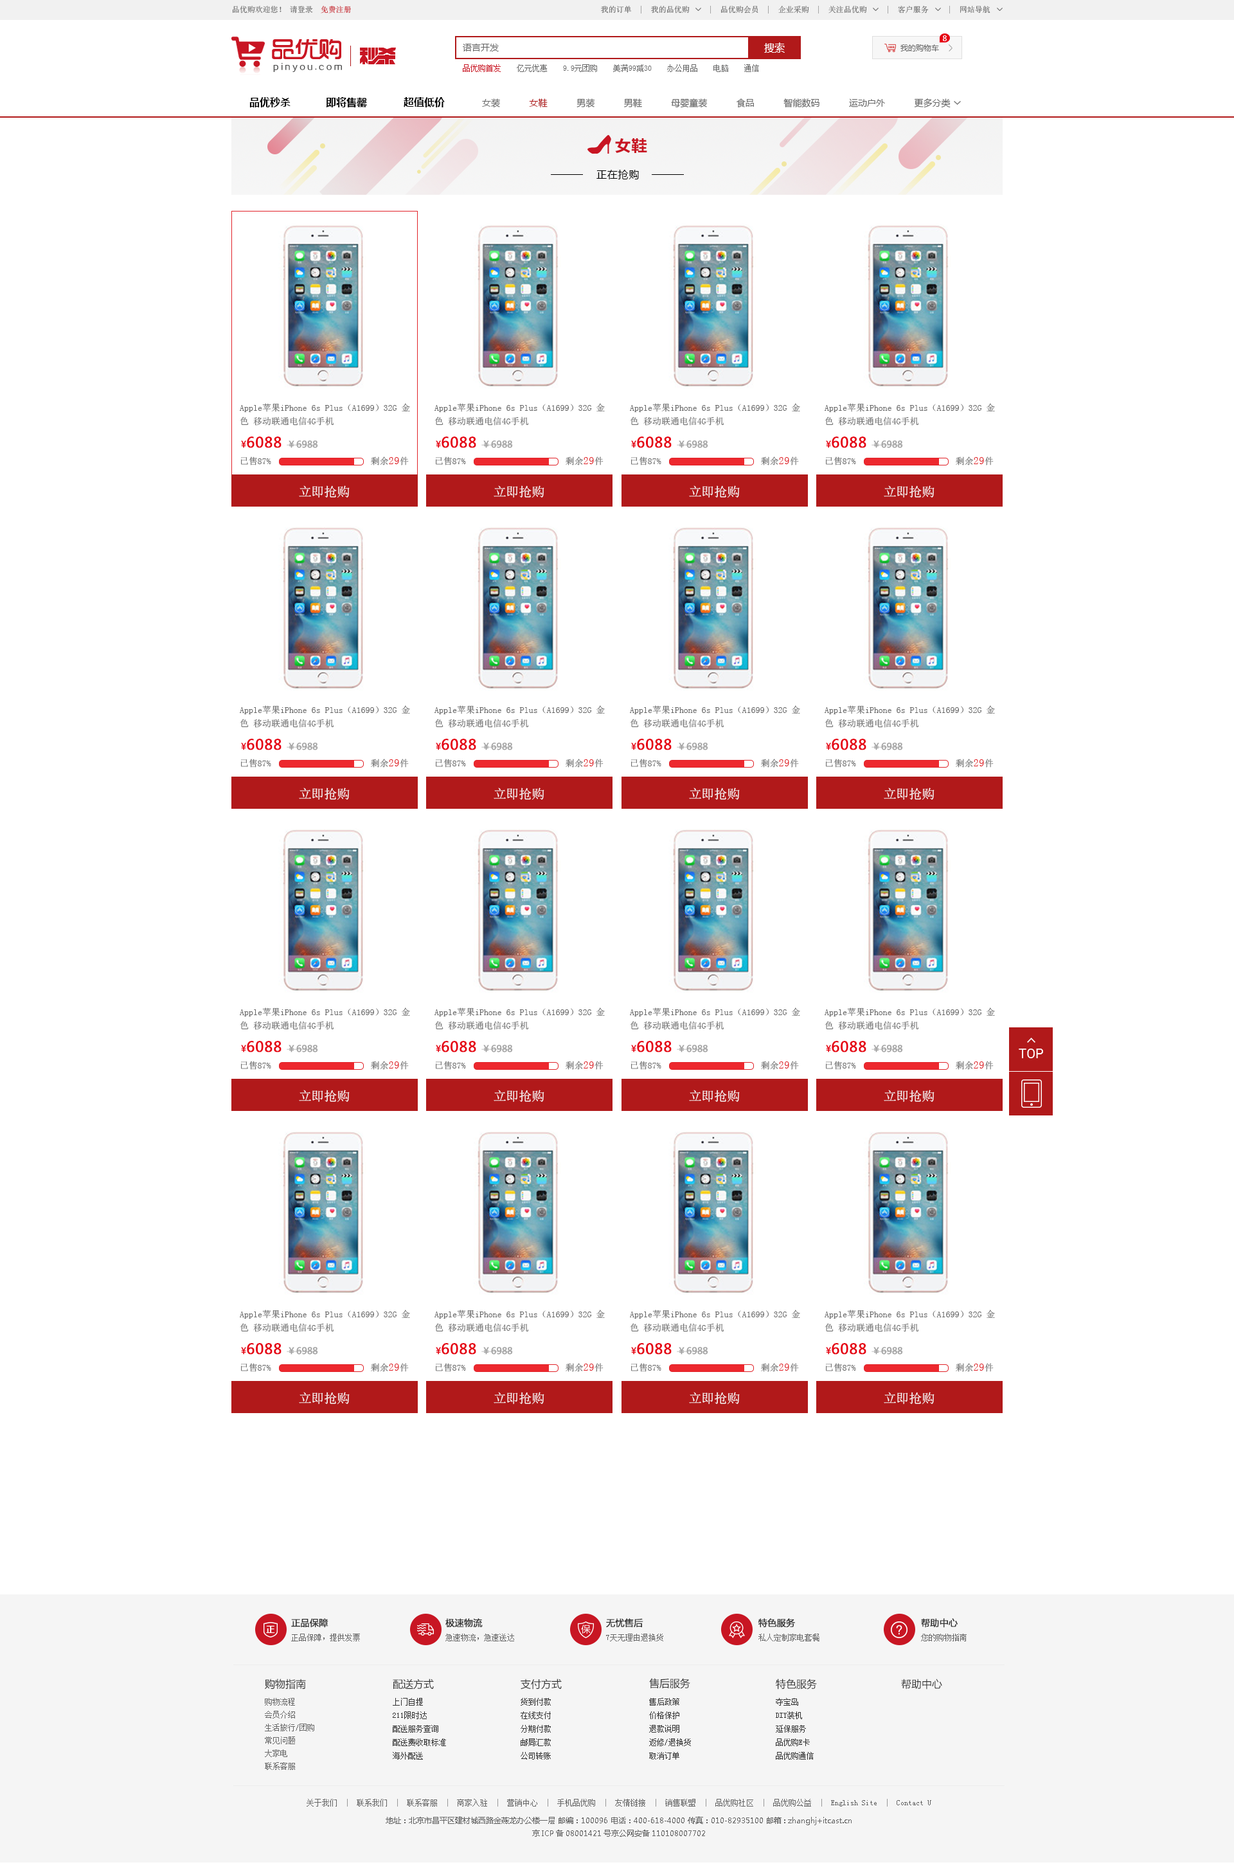
<style>
.page{position:relative;width:1234px;height:1867px;background:#ffffff}
.page>*{position:absolute;margin:0}
.t1{font:7.7px "SimSun";color:#666666}
.t2{font:7.7px "SimSun";color:#c81623}
.t3{font:7.7px "MicrosoftYaHei";color:#fefefe}
.t4{font:9px "MicrosoftYaHei";color:#666666}
.t5{font:10.3px "MicrosoftYaHei";color:#ffffff}
.t6{font:7.7px "MicrosoftYaHei";color:#666666}
.t7{font:10.3px "MicrosoftYaHei-Bold";color:#000000}
.t8{font:9px "MicrosoftYaHei";color:#b1191a}
.t9{font:15.4px "MicrosoftYaHei-Bold";letter-spacing:0.05em;color:#c81523}
.t10{font:10.3px "MicrosoftYaHei";letter-spacing:0.05em;color:#000000}
.t11{font:9px/13.5px "SimSun";color:#666666}
.t12{font:9px "MicrosoftYaHei";color:#a4a4a4;font-weight:bold}
.t13{font:9px "MicrosoftYaHei";color:#e60012;font-weight:bold}
.t14{font:14.1px "MicrosoftYaHei";color:#e60012;font-weight:bold}
.t15{font:9px "SimSun";color:#666666}
.t16{font:10.3px "SimSun";color:#e12228}
.t17{font:12.9px "SimSun";color:#ffffff}
.t18{font:12.9px "Roboto-Regular";color:#ffffff}
.t19{font:9px "MicrosoftYaHei";color:#333333;font-weight:bold}
.t20{font:10.3px "MicrosoftYaHei";color:#333333}
.t21{font:7.7px/12.9px "SimSun";color:#666666}
.t22{font:7.7px/13.5px "SimSun";color:#333333}
.t23{font:7.7px/12.9px "MicrosoftYaHei";color:#666666}
.t24{font:7.7px/18px "SimSun";color:#666666}
.t25{font:7.7px/18px "SimSun";color:#999999}
.t26{font:7.7px/8.4px "MicrosoftYaHei";color:#666666}
</style>
<div class="page">
<p class="t1" style="left:233px;top:6px;width:118px;height:7px">品优购欢迎您！ 请登录  <span class="t2">免费注册</span></p>
<p class="t1" style="left:601px;top:6px;width:390px;height:7px">我的订单  |  我的品优购     |  品优购会员  |  企业采购  |  关注品优购     |  客户服务     |  网站导航</p>
<p class="t3" style="left:943px;top:35px;width:4px;height:6px">8</p>
<p class="t4" style="left:463px;top:44px;width:36px;height:7px">语言开发</p>
<p class="t5" style="left:764px;top:42px;width:21px;height:11px">搜索</p>
<p class="t6" style="left:901px;top:44px;width:38px;height:7px">我的购物车</p>
<p class="t1" style="left:463px;top:64px;width:296px;height:8px"><span class="t2">品优购首发 </span>   亿元优惠    9.9元团购    美满99减30    办公用品    电脑    通信</p>
<p class="t7" style="left:249px;top:97px;width:42px;height:10px">品优秒杀</p>
<p class="t7" style="left:326px;top:97px;width:41px;height:10px">即将售罄</p>
<p class="t7" style="left:404px;top:97px;width:41px;height:10px">超值低价</p>
<p class="t4" style="left:482px;top:98px;width:469px;height:10px">女装           <span class="t8">女鞋</span>           男装           男鞋           母婴童装           食品           智能数码           运动户外           更多分类</p>
<p class="t9" style="left:615px;top:138px;width:32px;height:15px">女鞋</p>
<p class="t10" style="left:597px;top:170px;width:42px;height:9px">正在抢购</p>
<p class="t11" style="left:240px;top:403px;width:170px;height:23px">Apple苹果iPhone 6s Plus（A1699）32G 金色 移动联通电信4G手机</p>
<p class="t11" style="left:435px;top:403px;width:170px;height:23px">Apple苹果iPhone 6s Plus（A1699）32G 金色 移动联通电信4G手机</p>
<p class="t11" style="left:630px;top:403px;width:170px;height:23px">Apple苹果iPhone 6s Plus（A1699）32G 金色 移动联通电信4G手机</p>
<p class="t11" style="left:825px;top:403px;width:170px;height:23px">Apple苹果iPhone 6s Plus（A1699）32G 金色 移动联通电信4G手机</p>
<p class="t12" style="left:241px;top:436px;width:77px;height:12px"><span class="t13">¥</span><span class="t14">6088 </span>￥6988</p>
<p class="t12" style="left:436px;top:436px;width:77px;height:12px"><span class="t13">¥</span><span class="t14">6088 </span>￥6988</p>
<p class="t12" style="left:631px;top:436px;width:77px;height:12px"><span class="t13">¥</span><span class="t14">6088 </span>￥6988</p>
<p class="t12" style="left:826px;top:436px;width:77px;height:12px"><span class="t13">¥</span><span class="t14">6088 </span>￥6988</p>
<p class="t15" style="left:241px;top:456px;width:30px;height:9px">已售87%</p>
<p class="t15" style="left:371px;top:456px;width:38px;height:9px">剩余<span class="t16">29</span>件</p>
<p class="t15" style="left:436px;top:456px;width:30px;height:9px">已售87%</p>
<p class="t15" style="left:566px;top:456px;width:38px;height:9px">剩余<span class="t16">29</span>件</p>
<p class="t15" style="left:631px;top:456px;width:30px;height:9px">已售87%</p>
<p class="t15" style="left:761px;top:456px;width:38px;height:9px">剩余<span class="t16">29</span>件</p>
<p class="t15" style="left:826px;top:456px;width:30px;height:9px">已售87%</p>
<p class="t15" style="left:956px;top:456px;width:38px;height:9px">剩余<span class="t16">29</span>件</p>
<p class="t17" style="left:299px;top:485px;width:51px;height:13px">立即抢购</p>
<p class="t17" style="left:494px;top:485px;width:50px;height:13px">立即抢购</p>
<p class="t17" style="left:689px;top:485px;width:51px;height:13px">立即抢购</p>
<p class="t17" style="left:884px;top:485px;width:51px;height:13px">立即抢购</p>
<p class="t11" style="left:240px;top:705px;width:170px;height:23px">Apple苹果iPhone 6s Plus（A1699）32G 金色 移动联通电信4G手机</p>
<p class="t11" style="left:435px;top:705px;width:170px;height:23px">Apple苹果iPhone 6s Plus（A1699）32G 金色 移动联通电信4G手机</p>
<p class="t11" style="left:630px;top:705px;width:170px;height:23px">Apple苹果iPhone 6s Plus（A1699）32G 金色 移动联通电信4G手机</p>
<p class="t11" style="left:825px;top:705px;width:170px;height:23px">Apple苹果iPhone 6s Plus（A1699）32G 金色 移动联通电信4G手机</p>
<p class="t12" style="left:241px;top:739px;width:77px;height:11px"><span class="t13">¥</span><span class="t14">6088 </span>￥6988</p>
<p class="t12" style="left:436px;top:739px;width:77px;height:11px"><span class="t13">¥</span><span class="t14">6088 </span>￥6988</p>
<p class="t12" style="left:631px;top:739px;width:77px;height:11px"><span class="t13">¥</span><span class="t14">6088 </span>￥6988</p>
<p class="t12" style="left:826px;top:739px;width:77px;height:11px"><span class="t13">¥</span><span class="t14">6088 </span>￥6988</p>
<p class="t15" style="left:241px;top:759px;width:30px;height:9px">已售87%</p>
<p class="t15" style="left:371px;top:759px;width:38px;height:9px">剩余<span class="t16">29</span>件</p>
<p class="t15" style="left:436px;top:759px;width:30px;height:9px">已售87%</p>
<p class="t15" style="left:566px;top:759px;width:38px;height:9px">剩余<span class="t16">29</span>件</p>
<p class="t15" style="left:631px;top:759px;width:30px;height:9px">已售87%</p>
<p class="t15" style="left:761px;top:759px;width:38px;height:9px">剩余<span class="t16">29</span>件</p>
<p class="t15" style="left:826px;top:759px;width:30px;height:9px">已售87%</p>
<p class="t15" style="left:956px;top:759px;width:38px;height:9px">剩余<span class="t16">29</span>件</p>
<p class="t17" style="left:299px;top:787px;width:51px;height:13px">立即抢购</p>
<p class="t17" style="left:494px;top:787px;width:50px;height:13px">立即抢购</p>
<p class="t17" style="left:689px;top:787px;width:51px;height:13px">立即抢购</p>
<p class="t17" style="left:884px;top:787px;width:51px;height:13px">立即抢购</p>
<p class="t11" style="left:240px;top:1007px;width:170px;height:23px">Apple苹果iPhone 6s Plus（A1699）32G 金色 移动联通电信4G手机</p>
<p class="t11" style="left:435px;top:1007px;width:170px;height:23px">Apple苹果iPhone 6s Plus（A1699）32G 金色 移动联通电信4G手机</p>
<p class="t11" style="left:630px;top:1007px;width:170px;height:23px">Apple苹果iPhone 6s Plus（A1699）32G 金色 移动联通电信4G手机</p>
<p class="t11" style="left:825px;top:1007px;width:170px;height:23px">Apple苹果iPhone 6s Plus（A1699）32G 金色 移动联通电信4G手机</p>
<p class="t12" style="left:241px;top:1041px;width:77px;height:11px"><span class="t13">¥</span><span class="t14">6088 </span>￥6988</p>
<p class="t12" style="left:436px;top:1041px;width:77px;height:11px"><span class="t13">¥</span><span class="t14">6088 </span>￥6988</p>
<p class="t12" style="left:631px;top:1041px;width:77px;height:11px"><span class="t13">¥</span><span class="t14">6088 </span>￥6988</p>
<p class="t12" style="left:826px;top:1041px;width:77px;height:11px"><span class="t13">¥</span><span class="t14">6088 </span>￥6988</p>
<p class="t18" style="left:1019px;top:1048px;width:24px;height:10px">TOP</p>
<p class="t15" style="left:241px;top:1061px;width:30px;height:9px">已售87%</p>
<p class="t15" style="left:371px;top:1061px;width:38px;height:9px">剩余<span class="t16">29</span>件</p>
<p class="t15" style="left:436px;top:1061px;width:30px;height:9px">已售87%</p>
<p class="t15" style="left:566px;top:1061px;width:38px;height:9px">剩余<span class="t16">29</span>件</p>
<p class="t15" style="left:631px;top:1061px;width:30px;height:9px">已售87%</p>
<p class="t15" style="left:761px;top:1061px;width:38px;height:9px">剩余<span class="t16">29</span>件</p>
<p class="t15" style="left:826px;top:1061px;width:30px;height:9px">已售87%</p>
<p class="t15" style="left:956px;top:1061px;width:38px;height:9px">剩余<span class="t16">29</span>件</p>
<p class="t17" style="left:299px;top:1090px;width:51px;height:12px">立即抢购</p>
<p class="t17" style="left:494px;top:1090px;width:50px;height:12px">立即抢购</p>
<p class="t17" style="left:689px;top:1090px;width:51px;height:12px">立即抢购</p>
<p class="t17" style="left:884px;top:1090px;width:51px;height:12px">立即抢购</p>
<p class="t11" style="left:240px;top:1309px;width:170px;height:23px">Apple苹果iPhone 6s Plus（A1699）32G 金色 移动联通电信4G手机</p>
<p class="t11" style="left:435px;top:1309px;width:170px;height:23px">Apple苹果iPhone 6s Plus（A1699）32G 金色 移动联通电信4G手机</p>
<p class="t11" style="left:630px;top:1309px;width:170px;height:23px">Apple苹果iPhone 6s Plus（A1699）32G 金色 移动联通电信4G手机</p>
<p class="t11" style="left:825px;top:1309px;width:170px;height:23px">Apple苹果iPhone 6s Plus（A1699）32G 金色 移动联通电信4G手机</p>
<p class="t12" style="left:241px;top:1343px;width:77px;height:11px"><span class="t13">¥</span><span class="t14">6088 </span>￥6988</p>
<p class="t12" style="left:436px;top:1343px;width:77px;height:11px"><span class="t13">¥</span><span class="t14">6088 </span>￥6988</p>
<p class="t12" style="left:631px;top:1343px;width:77px;height:11px"><span class="t13">¥</span><span class="t14">6088 </span>￥6988</p>
<p class="t12" style="left:826px;top:1343px;width:77px;height:11px"><span class="t13">¥</span><span class="t14">6088 </span>￥6988</p>
<p class="t15" style="left:241px;top:1363px;width:30px;height:9px">已售87%</p>
<p class="t15" style="left:371px;top:1363px;width:38px;height:9px">剩余<span class="t16">29</span>件</p>
<p class="t15" style="left:436px;top:1363px;width:30px;height:9px">已售87%</p>
<p class="t15" style="left:566px;top:1363px;width:38px;height:9px">剩余<span class="t16">29</span>件</p>
<p class="t15" style="left:631px;top:1363px;width:30px;height:9px">已售87%</p>
<p class="t15" style="left:761px;top:1363px;width:38px;height:9px">剩余<span class="t16">29</span>件</p>
<p class="t15" style="left:826px;top:1363px;width:30px;height:9px">已售87%</p>
<p class="t15" style="left:956px;top:1363px;width:38px;height:9px">剩余<span class="t16">29</span>件</p>
<p class="t17" style="left:299px;top:1392px;width:51px;height:12px">立即抢购</p>
<p class="t17" style="left:494px;top:1392px;width:50px;height:12px">立即抢购</p>
<p class="t17" style="left:689px;top:1392px;width:51px;height:12px">立即抢购</p>
<p class="t17" style="left:884px;top:1392px;width:51px;height:12px">立即抢购</p>
<p class="t19" style="left:291px;top:1618px;width:37px;height:10px">正品保障</p>
<p class="t19" style="left:445px;top:1618px;width:38px;height:9px">极速物流</p>
<p class="t19" style="left:606px;top:1618px;width:37px;height:9px">无忧售后</p>
<p class="t19" style="left:758px;top:1618px;width:37px;height:10px">特色服务</p>
<p class="t19" style="left:921px;top:1618px;width:37px;height:10px">帮助中心</p>
<p class="t1" style="left:291px;top:1633px;width:69px;height:8px">正品保障，提供发票</p>
<p class="t1" style="left:445px;top:1633px;width:69px;height:8px">急速物流，急速送达</p>
<p class="t1" style="left:606px;top:1633px;width:57px;height:8px">7天无理由退换货</p>
<p class="t1" style="left:759px;top:1633px;width:61px;height:8px">私人定制家电套餐</p>
<p class="t1" style="left:921px;top:1633px;width:46px;height:8px">您的购物指南</p>
<p class="t20" style="left:265px;top:1678px;width:41px;height:11px">购物指南</p>
<p class="t20" style="left:393px;top:1678px;width:41px;height:11px">配送方式</p>
<p class="t20" style="left:521px;top:1678px;width:41px;height:11px">支付方式</p>
<p class="t20" style="left:649px;top:1678px;width:41px;height:11px">售后服务</p>
<p class="t20" style="left:776px;top:1678px;width:41px;height:11px">特色服务</p>
<p class="t20" style="left:901px;top:1678px;width:41px;height:11px">帮助中心</p>
<p class="t21" style="left:265px;top:1698px;width:49px;height:72px">购物流程<br>会员介绍<br>生活旅行/团购<br>常见问题<br>大家电<br>联系客服</p>
<p class="t22" style="left:393px;top:1698px;width:53px;height:61px">上门自提<br>211限时达<br>配送服务查询<br>配送费收取标准<br>海外配送</p>
<p class="t22" style="left:521px;top:1698px;width:30px;height:61px">货到付款<br>在线支付<br>分期付款<br>邮局汇款<br>公司转账</p>
<p class="t22" style="left:649px;top:1698px;width:42px;height:61px">售后政策<br>价格保护<br>退款说明<br>返修/退换货<br>取消订单</p>
<p class="t22" style="left:776px;top:1698px;width:38px;height:61px">夺宝岛<br>DIY装机<br>延保服务<br>品优购E卡<br>品优购通信</p>
<p class="t23" style="left:307px;top:1799px;width:624px;height:38px;text-align:center"><span class="t24">关于我们  </span><span class="t25">|</span><span class="t24">  联系我们  </span><span class="t25">|</span><span class="t24">  联系客服  </span><span class="t25">|</span><span class="t24">  商家入驻  </span><span class="t25">|</span><span class="t24">  营销中心  </span><span class="t25">|</span><span class="t24">  手机品优购  </span><span class="t25">|</span><span class="t24">  友情链接  </span><span class="t25">|</span><span class="t24">  销售联盟  </span><span class="t25">|</span><span class="t24">  品优购社区  </span><span class="t25">|</span><span class="t24">  品优购公益  </span><span class="t25">|</span><span class="t24">  English Site  </span><span class="t25">|</span><span class="t24">  Contact U<br></span>地址：北京市昌平区建材城西路金燕龙办公楼一层 邮编：100096 电话：400-618-4000 传真：010-82935100 邮箱: zhanghj+itcast.cn<br><span class="t26">京ICP备08001421号京公网安备110108007702</span></p>
</div>
